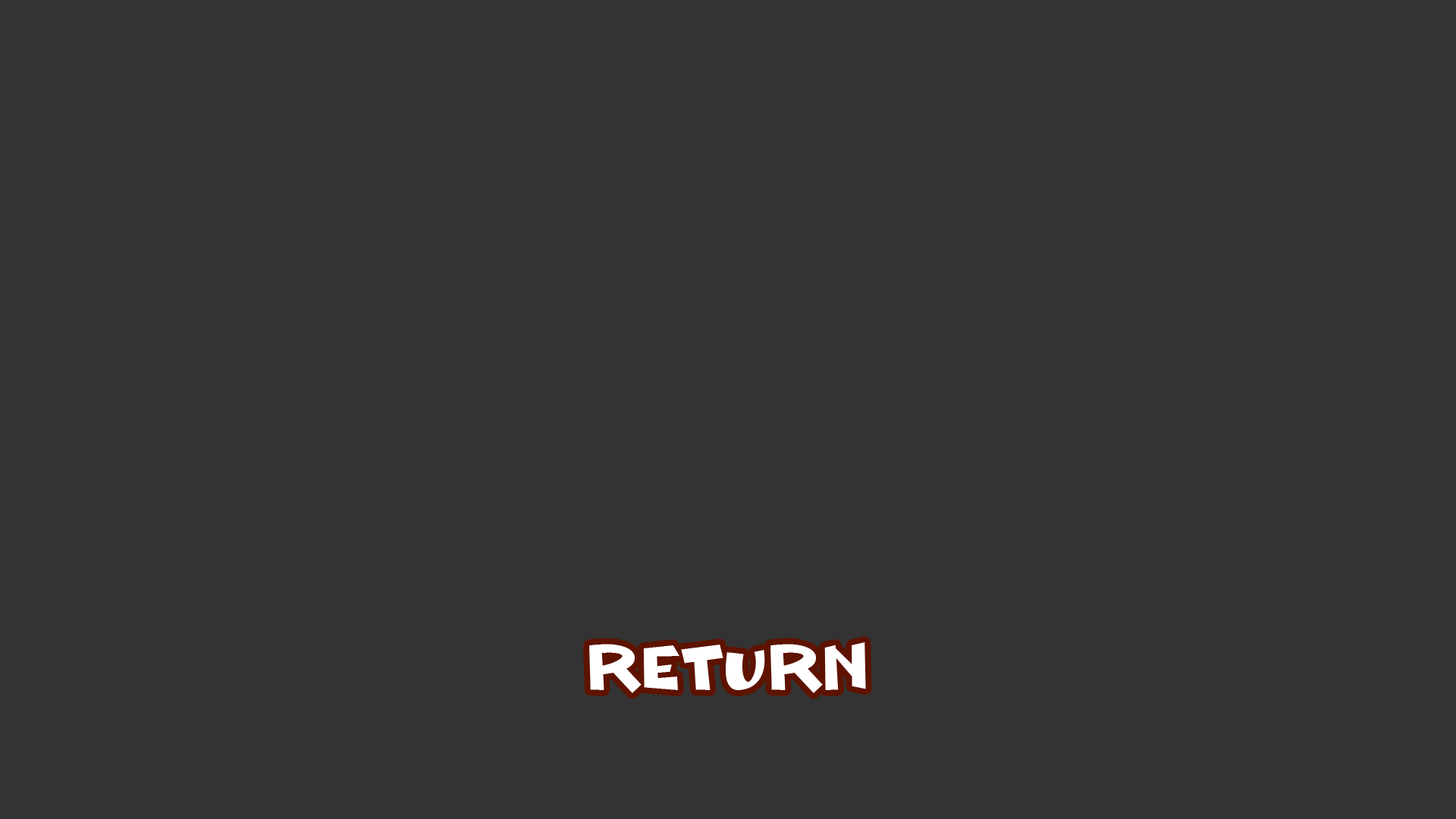
<style>
.page{position:relative;width:1456px;height:819px;background:#333333}
.page>*{position:absolute;margin:0}
.t1{font:71.7px "BLOCKHEADDUDEPersonalUse";color:#ffffff}
</style>
<div class="page">
<p class="t1" style="left:589px;top:642px;width:277px;height:51px">RETURN</p>
</div>
